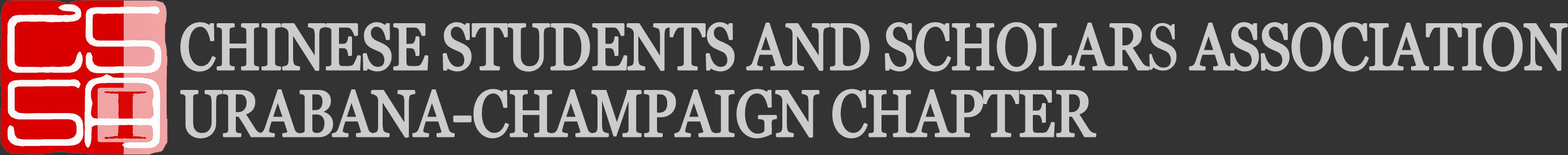
<style>
.page{position:relative;width:1568px;height:155px;background:#333333}
.page>*{position:absolute;margin:0}
.t1{font:65.5px/66.9px "Vani";letter-spacing:-0.04em;color:#cccccc;font-weight:bold;scale:0.87 1}
</style>
<div class="page">
<p class="t1" style="left:180px;top:22px;width:1388px;height:117px">CHINESE STUDENTS AND SCHOLARS ASSOCIATION<br>URABANA-CHAMPAIGN CHAPTER</p>
</div>
